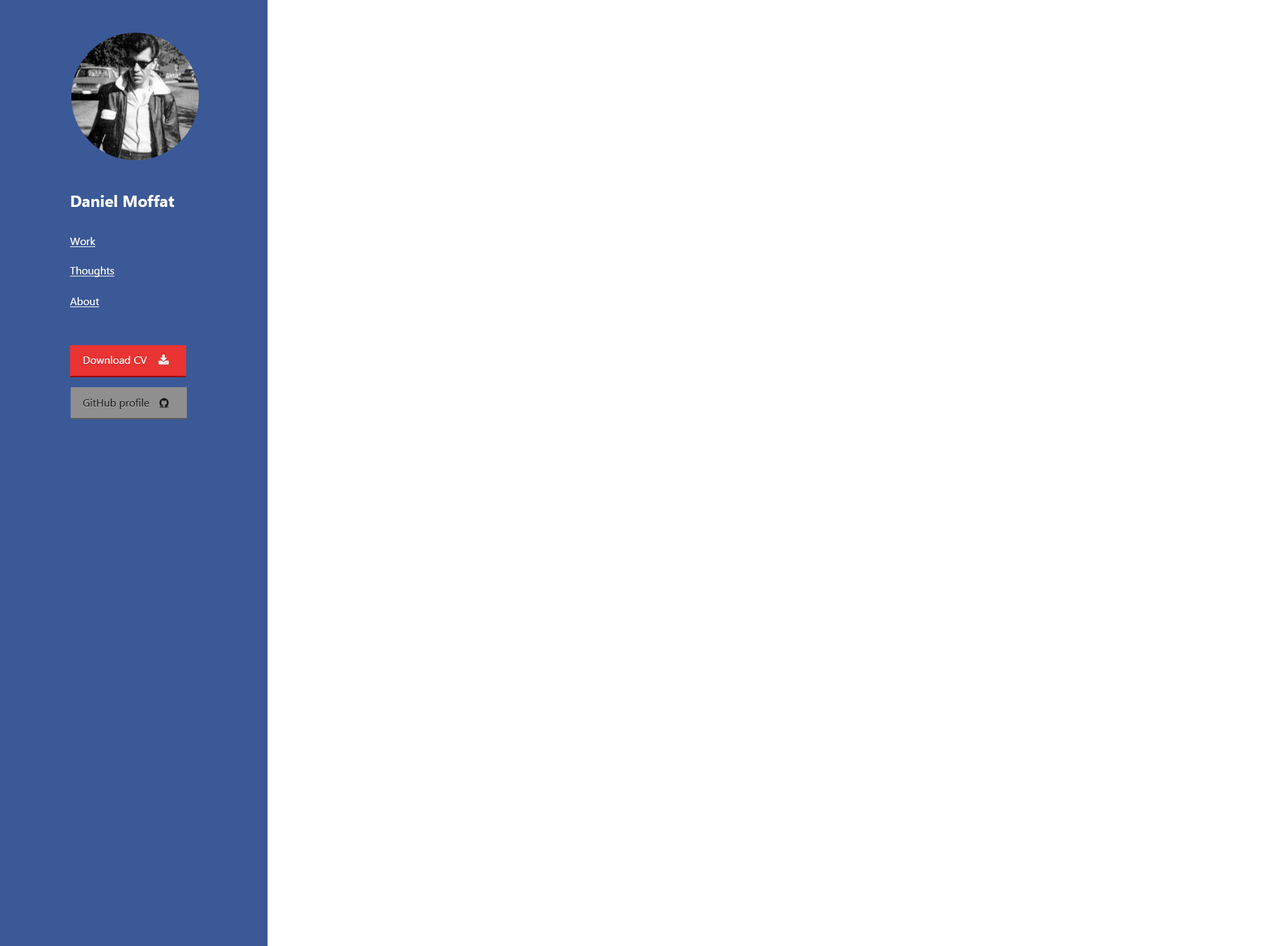
<style>
.page{position:relative;width:1261px;height:946px;background:#ffffff}
.page>*{position:absolute;margin:0}
.t1{font:16px "SegoeUI-Bold";color:#ffffff}
.t2{font:10.7px "LaoUI";color:#ffffff}
.t3{font:10.7px "LaoUI";color:#fefefe}
.t4{font:10.7px "LaoUI";color:#1d1d1d}
</style>
<div class="page">
<p class="t1" style="left:71px;top:195px;width:103px;height:12px">Daniel Moffat</p>
<p class="t2" style="left:70px;top:237px;width:25px;height:11px">Work</p>
<p class="t3" style="left:70px;top:266px;width:45px;height:11px">Thoughts</p>
<p class="t2" style="left:70px;top:297px;width:29px;height:11px">About</p>
<p class="t2" style="left:83px;top:356px;width:64px;height:8px">Download CV</p>
<p class="t4" style="left:83px;top:398px;width:66px;height:11px">GitHub profile</p>
</div>
